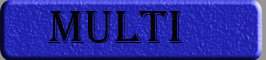
<style>
.page{position:relative;width:266px;height:60px}
.page>*{position:absolute;margin:0}
.t1{font:48px "Algerian";color:#050505}
</style>
<div class="page">
<p class="t1" style="left:48px;top:11px;width:135px;height:32px">MULTI</p>
</div>
